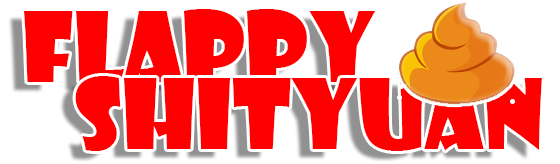
<style>
.page{position:relative;width:560px;height:164px;background:#ff0000}
.page>*{position:absolute;margin:0}
.t1{font:95px "ShowcardGothic-Reg";color:#ff0000}
</style>
<div class="page">
<p class="t1" style="left:24px;top:9px;width:351px;height:75px">Flappy</p>
<p class="t1" style="left:75px;top:76px;width:467px;height:75px">shityuan</p>
</div>
